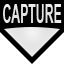
<style>
.page{position:relative;width:64px;height:64px;background:#000000}
.page>*{position:absolute;margin:0}
.t1{font:26.2px "ArialNarrow-Bold";letter-spacing:0.01em;color:#e6e6e6;scale:0.56 1}
</style>
<div class="page">
<p class="t1" style="left:3px;top:4px;width:59px;height:19px">CAPTURE</p>
</div>
